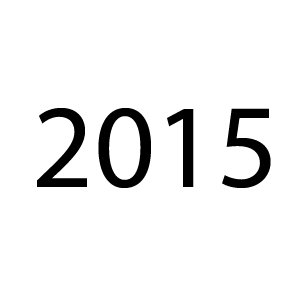
<style>
.page{position:relative;width:300px;height:300px;background:#ffffff}
.page>*{position:absolute;margin:0}
.t1{font:120px "MyriadPro-Regular";color:#000000}
</style>
<div class="page">
<p class="t1" style="left:37px;top:108px;width:234px;height:80px">2015</p>
</div>
